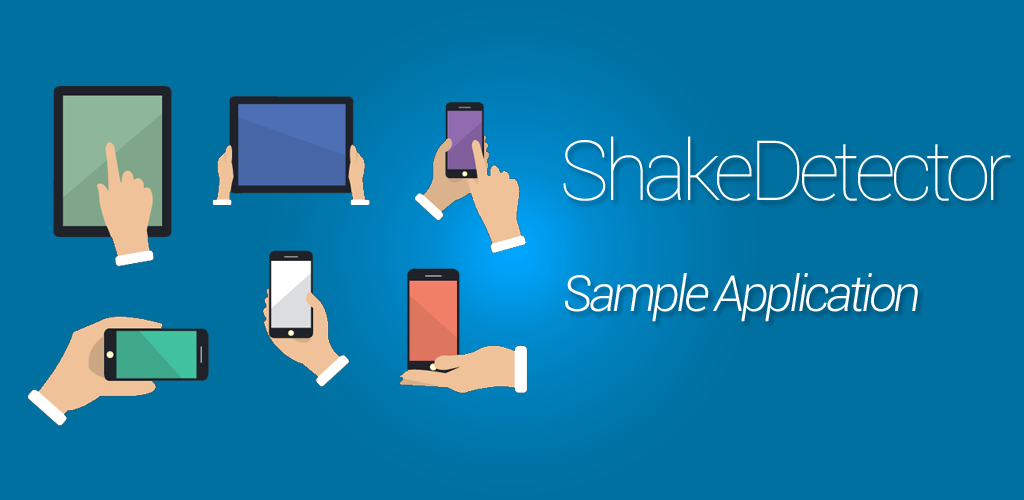
<style>
.page{position:relative;width:1024px;height:500px;background:#0070a0}
.page>*{position:absolute;margin:0}
.t1{font:83.3px "Roboto-Thin";letter-spacing:-0.076em;color:#ffffff}
.t2{font:50px "Roboto-LightItalic";letter-spacing:-0.076em;color:#ffffff}
</style>
<div class="page">
<p class="t1" style="left:563px;top:136px;width:448px;height:65px">ShakeDetector</p>
<p class="t2" style="left:565px;top:273px;width:353px;height:49px">Sample Application</p>
</div>
